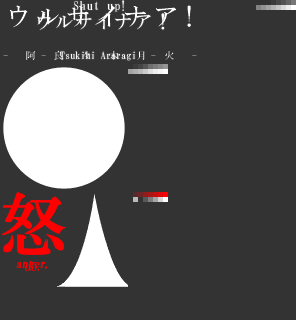
<style>
.page{position:relative;width:296px;height:320px;background:#333333}
.page>*{position:absolute;margin:0}
.t1{font:12px/9px "HGMinchoB";letter-spacing:0.075em;color:#ffffff}
.t2{font:18px/9px "HGMinchoB";letter-spacing:0.1em;color:#ffffff}
.t3{font:10px "HGMinchoB";letter-spacing:0.01em;color:#ffffff}
.t4{font:12px/20px "HGMinchoB";color:#ff0000;font-style:italic}
.t5{font:69px/20px "HGMinchoB";letter-spacing:0.075em;color:#ff0000}
</style>
<div class="page">
<p class="t1" style="left:37px;top:0px;width:128px;height:30px;text-align:center">Shut up! <br><br><span class="t2">ウルサイナア！</span></p>
<p class="t3" style="left:60px;top:51px;width:75px;height:10px">Tsukihi Araragi</p>
<p class="t4" style="left:2px;top:192px;width:64px;height:78px;text-align:center"><span class="t5">怒<br></span>anger.</p>
</div>
